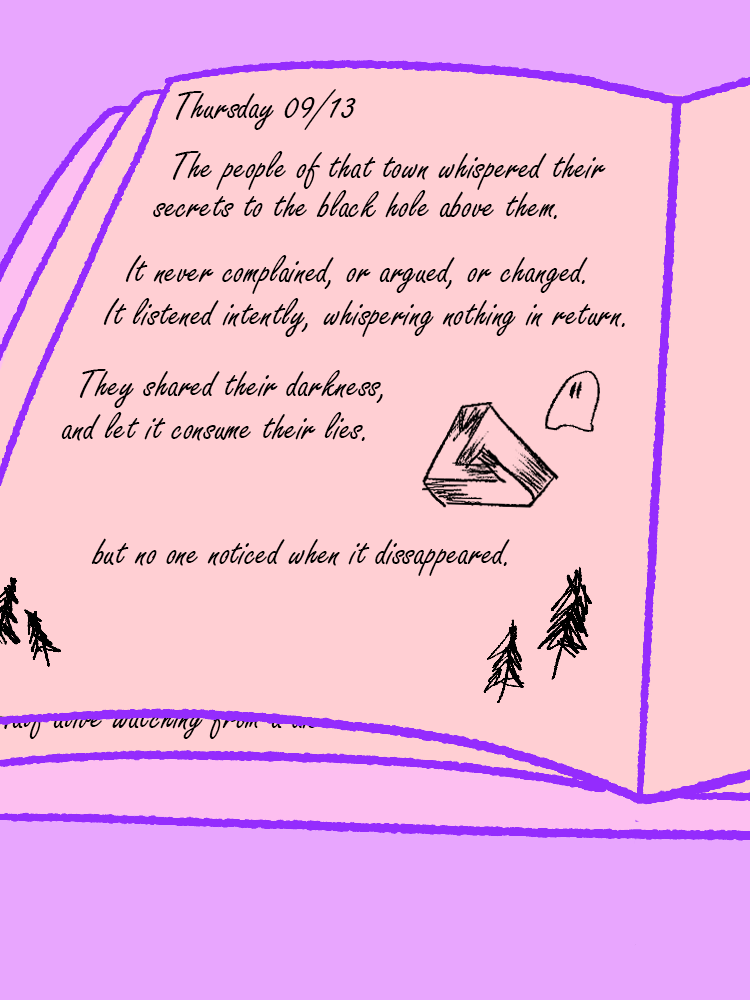
<style>
.page{position:relative;width:750px;height:1000px;background:#ffcfd3}
.page>*{position:absolute;margin:0}
.t1{font:41.7px "FreestyleScript-Regular";color:#000000}
</style>
<div class="page">
<p class="t1" style="left:175px;top:89px;width:181px;height:41px">Thursday 09/13</p>
<p class="t1" style="left:172px;top:151px;width:434px;height:39px">The people of that town whispered their</p>
<p class="t1" style="left:153px;top:190px;width:404px;height:29px">secrets to the black hole above them.</p>
<p class="t1" style="left:125px;top:255px;width:463px;height:39px">It never complained, or argued, or changed.</p>
<p class="t1" style="left:103px;top:298px;width:522px;height:39px">It listened intently, whispering nothing in return.</p>
<p class="t1" style="left:79px;top:369px;width:304px;height:39px">They shared their darkness,</p>
<p class="t1" style="left:61px;top:412px;width:304px;height:29px">and let it consume their lies.</p>
<p class="t1" style="left:91px;top:538px;width:419px;height:38px">but no one noticed when it dissappeared.</p>
</div>
